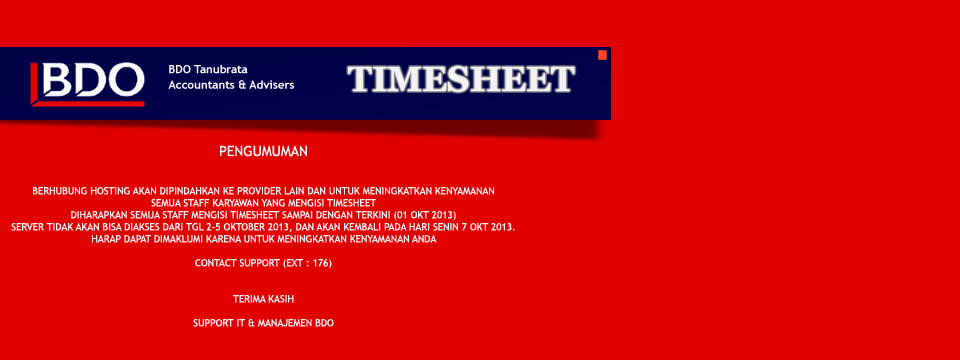
<style>
.page{position:relative;width:960px;height:360px;background:#e10000}
.page>*{position:absolute;margin:0}
.t1{font:14px "TrebuchetMS";color:#f6f6fa}
.t2{font:10px "TrebuchetMS";color:#f6f6fa}
</style>
<div class="page">
<p class="t1" style="left:220px;top:145px;width:87px;height:12px">PENGUMUMAN</p>
<p class="t2" style="left:11px;top:187px;width:504px;height:140px;text-align:center">BERHUBUNG HOSTING AKAN DIPINDAHKAN KE PROVIDER LAIN DAN UNTUK MENINGKATKAN KENYAMANAN<br>SEMUA STAFF KARYAWAN YANG MENGISI TIMESHEET<br>DIHARAPKAN SEMUA STAFF MENGISI TIMESHEET SAMPAI DENGAN TERKINI (01 OKT 2013)<br>SERVER TIDAK AKAN BISA DIAKSES DARI TGL 2-5 OKTOBER 2013, DAN AKAN KEMBALI PADA HARI SENIN 7 OKT 2013.<br>HARAP DAPAT DIMAKLUMI KARENA UNTUK MENINGKATKAN KENYAMANAN ANDA<br><br>CONTACT SUPPORT (EXT : 176)<br><br><br>TERIMA KASIH<br><br>SUPPORT IT &amp; MANAJEMEN BDO</p>
</div>
